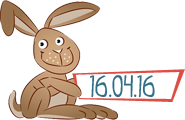
<style>
.page{position:relative;width:185px;height:120px;background:#ffffff}
.page>*{position:absolute;margin:0}
.t1{font:24px "IndyPimp";color:#306e87}
</style>
<div class="page">
<p class="t1" style="left:90px;top:75px;width:65px;height:23px">16.04.16</p>
</div>
